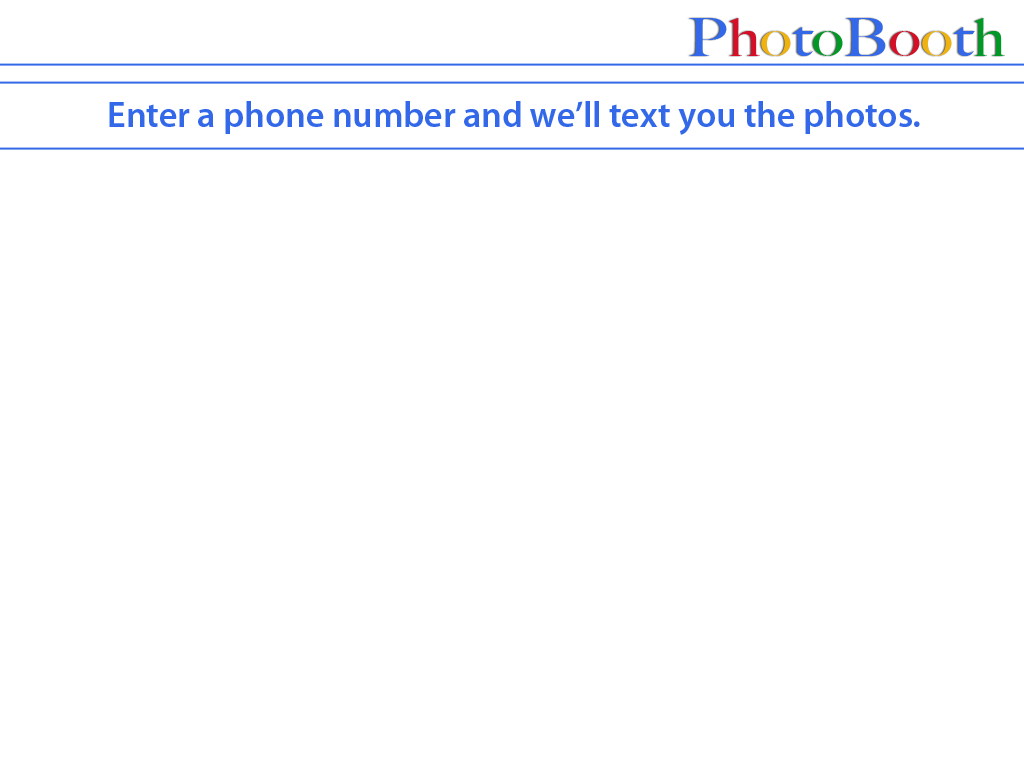
<style>
.page{position:relative;width:1024px;height:768px;background:#ffffff}
.page>*{position:absolute;margin:0}
.t1{font:36px "MyriadPro-Semibold";color:#3369e8}
</style>
<div class="page">
<p class="t1" style="left:109px;top:101px;width:811px;height:34px">Enter a phone number and we’ll text you the photos.</p>
</div>
